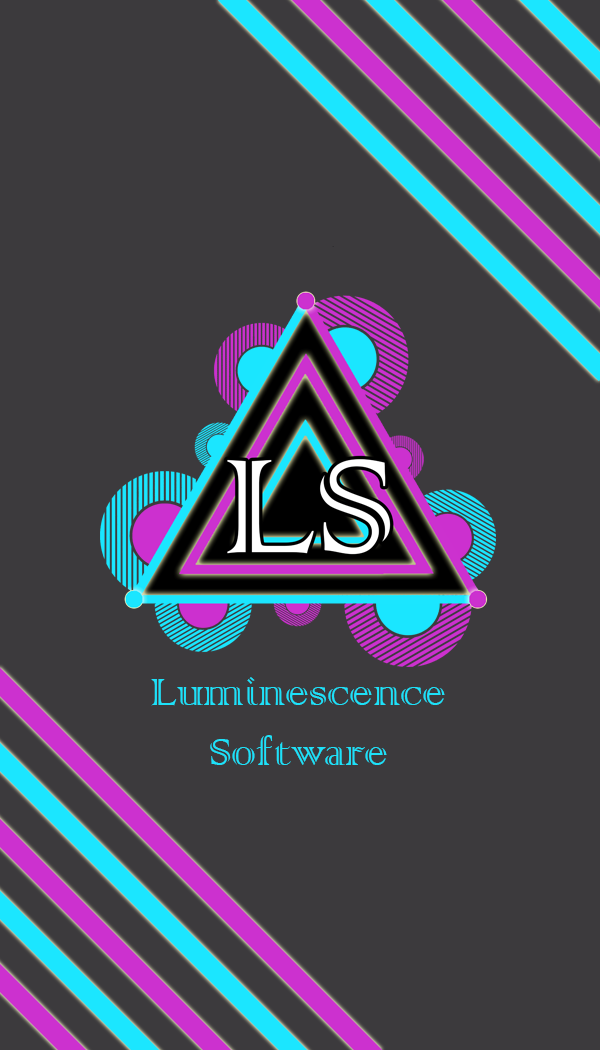
<style>
.page{position:relative;width:600px;height:1050px;background:#3c3a3d}
.page>*{position:absolute;margin:0}
.t1{font:50px "ColonnaMT";color:#1be6ff}
</style>
<div class="page">
<p class="t1" style="left:151px;top:677px;width:294px;height:88px;text-align:center;opacity:0.96">Luminescence<br>Software</p>
</div>
